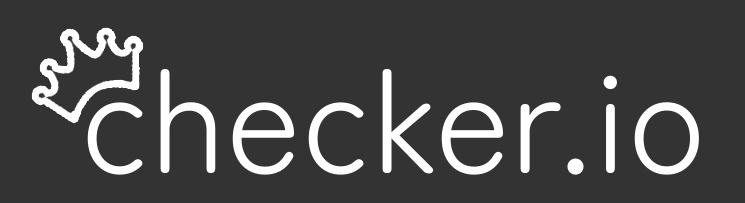
<style>
.page{position:relative;width:745px;height:203px;background:#333333}
.page>*{position:absolute;margin:0}
.t1{font:144px "ZenMaruGothic-Regular";color:#ffffff}
</style>
<div class="page">
<p class="t1" style="left:87px;top:69px;width:612px;height:106px">checker.io</p>
</div>
